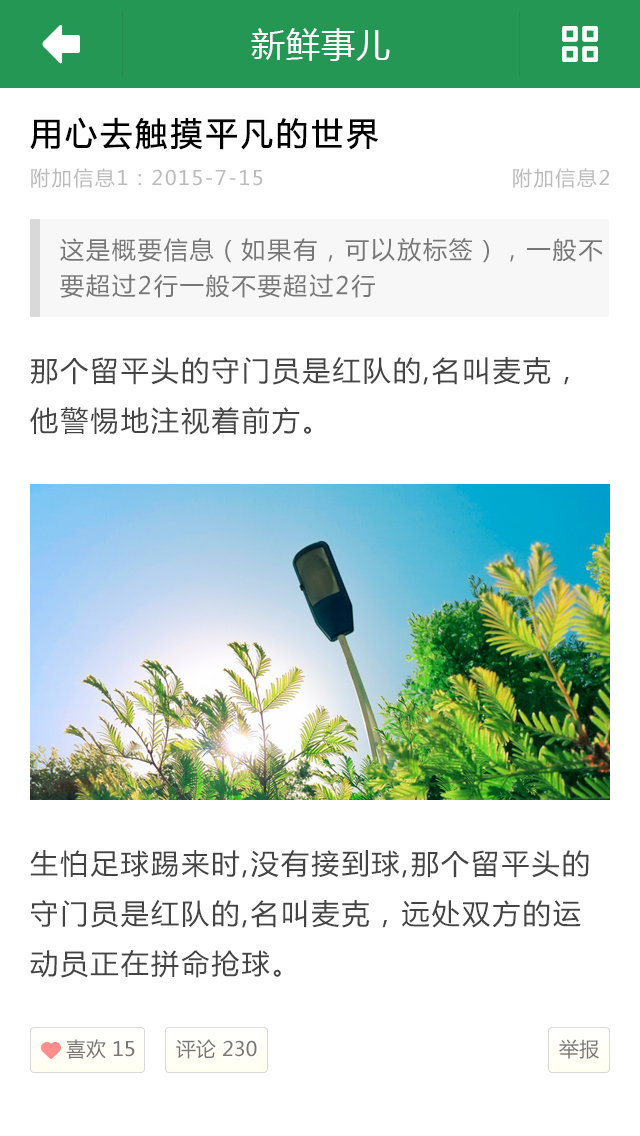
<style>
.page{position:relative;width:640px;height:1136px;background:#ffffff}
.page>*{position:absolute;margin:0}
.t1{font:32px "MicrosoftYaHei";letter-spacing:0.08em;color:#000000;font-weight:bold}
.t2{font:20px "MicrosoftYaHei";letter-spacing:0.08em;color:#bbbbbb}
.t3{font:24px/36px "MicrosoftYaHei";letter-spacing:0.08em;color:#777777}
.t4{font:28px/50px "MicrosoftYaHei";letter-spacing:0.08em;color:#444444}
.t5{font:20px "MicrosoftYaHei";color:#777777}
</style>
<div class="page">
<p class="t1" style="left:30px;top:117px;width:348px;height:33px">用心去触摸平凡的世界</p>
<p class="t2" style="left:31px;top:168px;width:232px;height:20px">附加信息1：2015-7-15</p>
<p class="t2" style="left:513px;top:168px;width:96px;height:20px">附加信息2</p>
<p class="t3" style="left:60px;top:238px;width:543px;height:60px">这是概要信息（如果有，可以放标签），一般不要超过2行一般不要超过2行</p>
<p class="t4" style="left:30px;top:357px;width:539px;height:78px">那个留平头的守门员是红队的,名叫麦克，他警惕地注视着前方。</p>
<p class="t4" style="left:30px;top:850px;width:559px;height:128px">生怕足球踢来时,没有接到球,那个留平头的守门员是红队的,名叫麦克，远处双方的运动员正在拼命抢球。</p>
<p class="t5" style="left:66px;top:1039px;width:69px;height:20px">喜欢 15</p>
<p class="t5" style="left:176px;top:1039px;width:81px;height:20px">评论 230</p>
<p class="t5" style="left:559px;top:1039px;width:40px;height:20px">举报</p>
</div>
